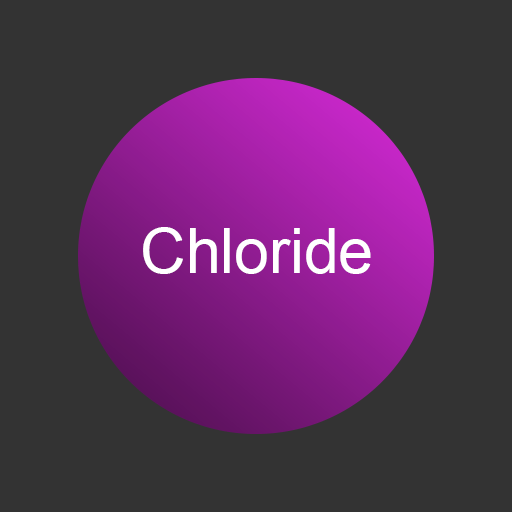
<style>
.page{position:relative;width:512px;height:512px;background:#333333}
.page>*{position:absolute;margin:0}
.t1{font:62.5px "ArialMT";color:#ffffff}
</style>
<div class="page">
<p class="t1" style="left:143px;top:227px;width:228px;height:47px">Chloride</p>
</div>
